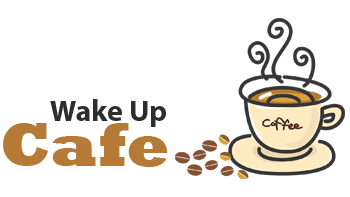
<style>
.page{position:relative;width:350px;height:197px;background:#ffffff}
.page>*{position:absolute;margin:0}
.t1{font:29.9px "MyriadPro-Bold";color:#2d2d2d}
.t2{font:63.3px "Rockwell-ExtraBold";color:#b57b36}
</style>
<div class="page">
<p class="t1" style="left:50px;top:99px;width:116px;height:28px">Wake Up</p>
<p class="t2" style="left:3px;top:123px;width:165px;height:44px">Cafe</p>
</div>
